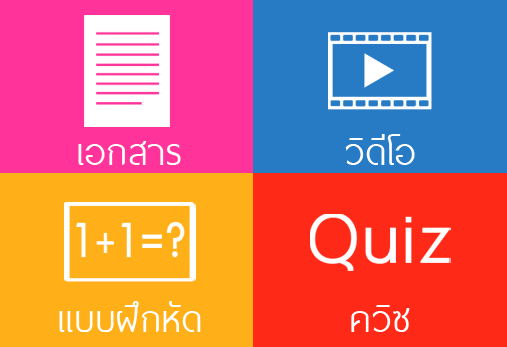
<style>
.page{position:relative;width:507px;height:347px;background:#ff2917}
.page>*{position:absolute;margin:0}
.t1{font:48px "ThaiSansLite";color:#ffffff}
</style>
<div class="page">
<p class="t1" style="left:345px;top:134px;width:70px;height:31px">วิดีโอ</p>
<p class="t1" style="left:78px;top:141px;width:103px;height:24px">เอกสาร</p>
<p class="t1" style="left:59px;top:301px;width:142px;height:31px">แบบฝึกหัด</p>
<p class="t1" style="left:351px;top:305px;width:59px;height:27px">ควิซ</p>
</div>
